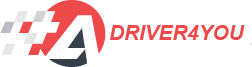
<style>
.page{position:relative;width:252px;height:67px;background:#ffffff}
.page>*{position:absolute;margin:0}
.t1{font:21px "Arial-BoldItalicMT";letter-spacing:-0.01em;color:#ef4a4b}
</style>
<div class="page">
<p class="t1" style="left:110px;top:25px;width:135px;height:15px">DRIVER4YOU</p>
</div>
